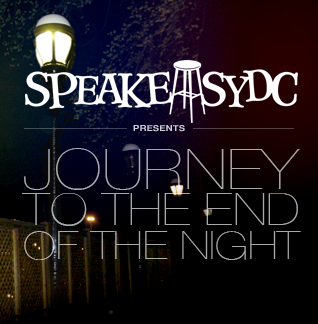
<style>
.page{position:relative;width:318px;height:324px;background:#000000}
.page>*{position:absolute;margin:0}
.t1{font:11.9px "HelveticaNeue-Bold";color:#cdccd3;font-variant:small-caps;scale:1.18 1}
.t2{font:38.6px/34.1px "HelveticaNeue-UltraLight";color:#a8a8a8;text-transform:uppercase;scale:1.18 1}
.t3{font:56.1px/32.4px "HelveticaNeue-UltraLight";color:#a8a8a8;text-transform:uppercase;scale:1.18 1}
.t4{font:44.4px/35.8px "HelveticaNeue-UltraLight";color:#a8a8a8;text-transform:uppercase;scale:1.18 1}
</style>
<div class="page">
<p class="t1" style="left:133px;top:125px;width:52px;height:7px">presents</p>
<p class="t2" style="left:22px;top:148px;width:279px;height:112px"><span class="t3">Journey<br></span><span class="t4">To The End<br></span>Of The Night</p>
<p class="t2" style="left:22px;top:148px;width:279px;height:112px"><span class="t3">Journey<br></span><span class="t4">To The End<br></span>Of The Night</p>
<p class="t2" style="left:22px;top:148px;width:279px;height:112px"><span class="t3">Journey<br></span><span class="t4">To The End<br></span>Of The Night</p>
</div>
